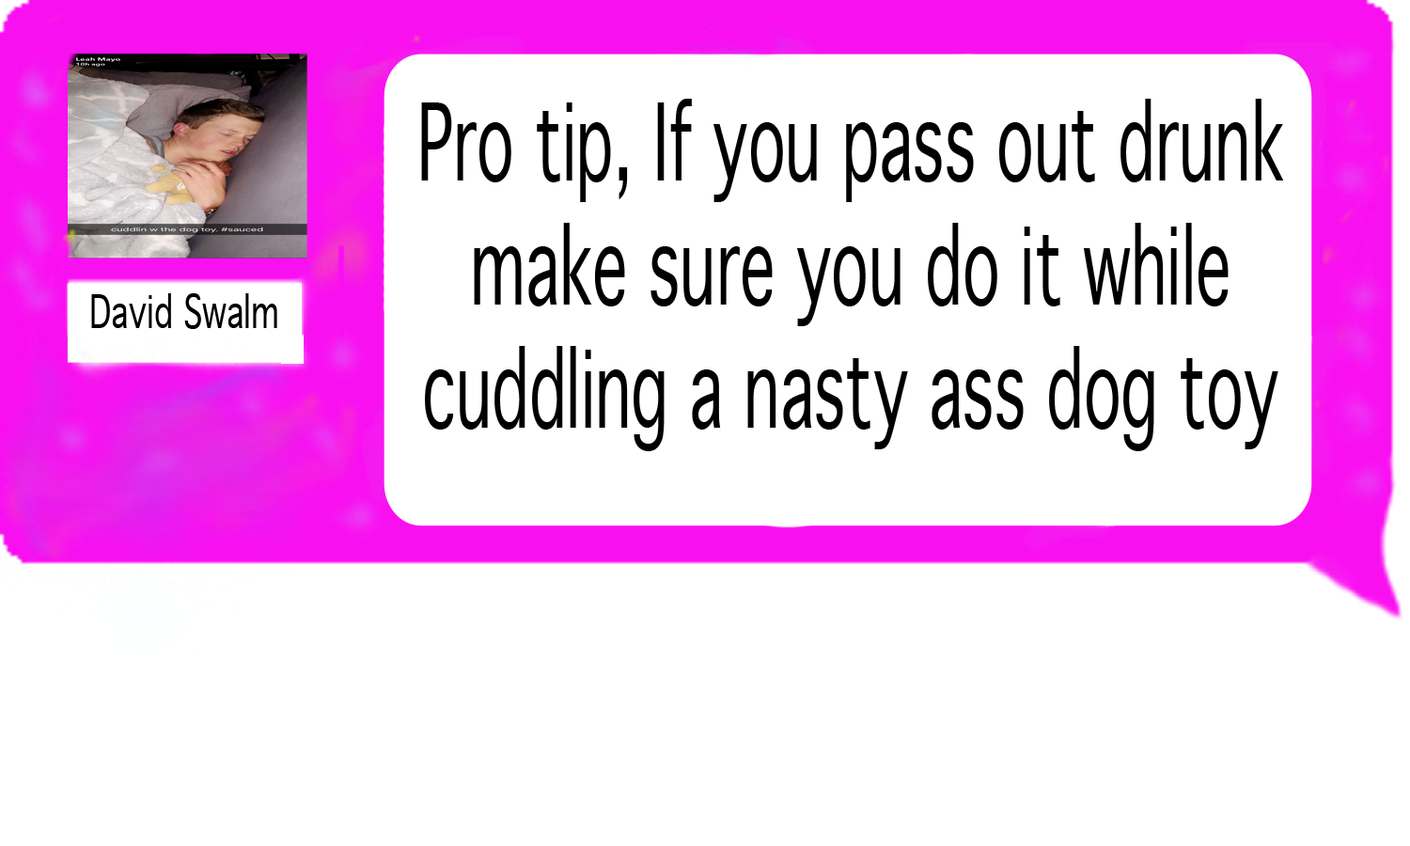
<style>
.page{position:relative;width:1410px;height:846px;background:#ffffff}
.page>*{position:absolute;margin:0}
.t1{font:102.9px "Geneva";color:#010000;scale:0.6 1}
.t2{font:43.4px "Geneva";color:#010000;scale:0.72 1}
</style>
<div class="page">
<p class="t1" style="left:421px;top:99px;width:863px;height:352px;text-align:center">Pro tip, If you pass out drunk<br>make sure you do it while<br>cuddling a nasty ass dog toy</p>
<p class="t2" style="left:91px;top:293px;width:186px;height:36px">David Swalm</p>
</div>
